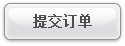
<style>
.page{position:relative;width:125px;height:46px}
.page>*{position:absolute;margin:0}
.t1{font:14px "SimSun";color:#4d4d4d;font-weight:bold}
</style>
<div class="page">
<p class="t1" style="left:33px;top:14px;width:59px;height:14px">提交订单</p>
</div>
